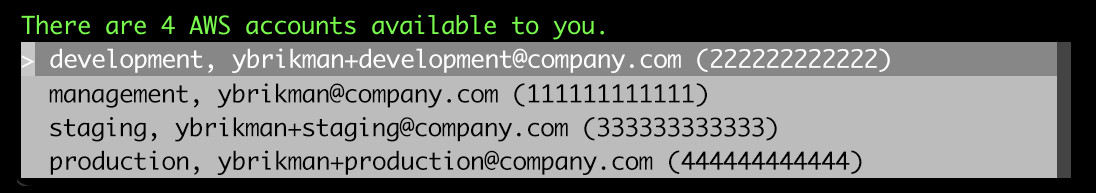
<style>
.page{position:relative;width:1096px;height:193px;background:#bcbcbc}
.page>*{position:absolute;margin:0}
.t1{font:24px "Monaco";letter-spacing:-0.015em;color:#ffffff}
.t2{font:24px "Monaco";letter-spacing:-0.015em;color:#000000}
</style>
<div class="page">
<p class="t1" style="left:50px;top:48px;width:840px;height:25px">development, ybrikman+development@company.com (222222222222)</p>
<p class="t2" style="left:49px;top:83px;width:658px;height:25px">management, ybrikman@company.com (111111111111)</p>
<p class="t2" style="left:50px;top:117px;width:727px;height:25px">staging, ybrikman+staging@company.com (333333333333)</p>
<p class="t2" style="left:50px;top:150px;width:812px;height:25px">production, ybrikman+production@company.com (444444444444)</p>
</div>
